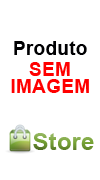
<style>
.page{position:relative;width:100px;height:180px;background:#ffffff}
.page>*{position:absolute;margin:0}
.t1{font:19.4px "Arial-BoldMT";color:#000002}
.t2{font:19.4px "Arial-BoldMT";color:#ff0000}
.t3{font:24.3px "Arial-BoldMT"}
</style>
<div class="page">
<p class="t1" style="left:14px;top:41px;width:73px;height:14px">Produto</p>
<p class="t2" style="left:29px;top:62px;width:41px;height:14px">SEM</p>
<p class="t2" style="left:11px;top:79px;width:78px;height:14px">IMAGEM</p>
<p class="t3" style="left:33px;top:133px;width:61px;height:17px">Store</p>
</div>
